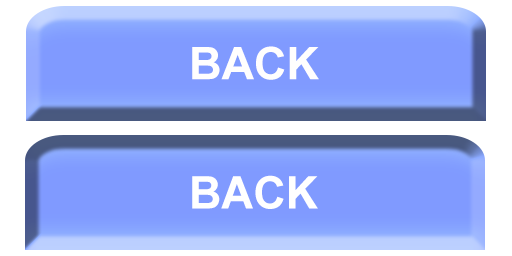
<style>
.page{position:relative;width:512px;height:256px;background:#809aff}
.page>*{position:absolute;margin:0}
.t1{font:45px "Arial-BoldMT";color:#fffefe}
.t2{font:45px "Arial-BoldMT";color:#ffffff}
</style>
<div class="page">
<p class="t1" style="left:192px;top:46px;width:127px;height:34px">BACK</p>
<p class="t2" style="left:192px;top:175px;width:126px;height:34px">BACK</p>
</div>
